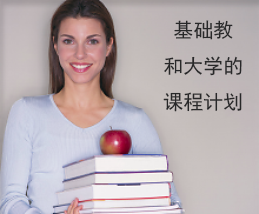
<style>
.page{position:relative;width:259px;height:214px}
.page>*{position:absolute;margin:0}
.t1{font:20px/36px "SimHei";color:#282829}
</style>
<div class="page">
<p class="t1" style="left:163px;top:20px;width:79px;height:92px;text-align:center">基础教<br>和大学的<br>课程计划</p>
</div>
